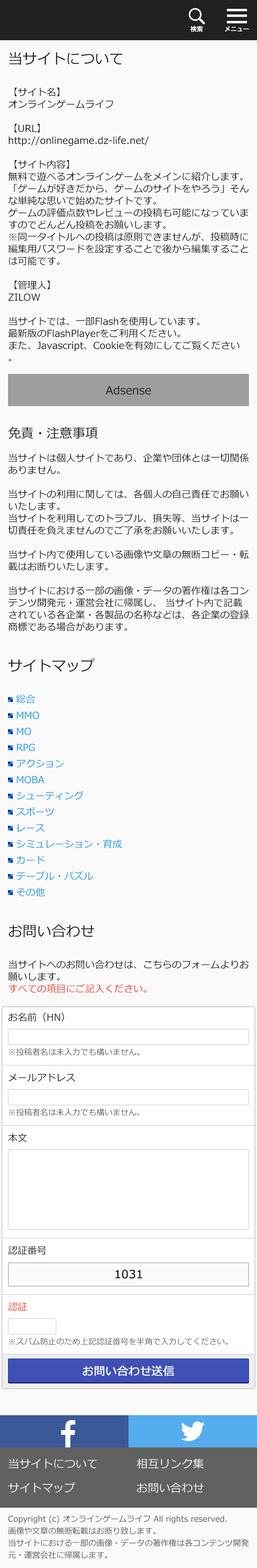
<style>
.page{position:relative;width:257px;height:1568px;background:#fafafa}
.page>*{position:absolute;margin:0}
.t1{font:14.5px "Meiryo";color:#212121}
.t2{font:9.6px/12.1px "Meiryo";color:#212121}
.t3{font:11.3px "Meiryo";color:#212121}
.t4{font:12.9px "Meiryo";color:#212121}
.t5{font:9.6px/16.1px "Meiryo";color:#2196f3}
.t6{font:9.6px/12.1px "Meiryo";color:#f44336}
.t7{font:9.6px/60.3px "Meiryo";color:#212121}
.t8{font:9.6px/112.6px "Meiryo";color:#212121}
.t9{font:9.6px/56.3px "Meiryo";color:#212121}
.t10{font:9.6px/24.1px "Meiryo";color:#f44336}
.t11{font:8px "Meiryo";color:#616161}
.t12{font:11.3px "Meiryo";color:#212121;font-weight:bold}
.t13{font:11.3px "Meiryo";color:#ffffff;font-weight:bold}
</style>
<div class="page">
<p class="t1" style="left:9px;top:52px;width:114px;height:13px">当サイトについて</p>
<p class="t2" style="left:8px;top:88px;width:241px;height:273px">【サイト名】<br>オンラインゲームライフ<br><br>【URL】<br>http://onlinegame.dz-life.net/<br><br>【サイト内容】<br>無料で遊べるオンラインゲームをメインに紹介します。<br>「ゲームが好きだから、ゲームのサイトをやろう」そんな単純な思いで始めたサイトです。<br>ゲームの評価点数やレビューの投稿も可能になっていますのでどんどん投稿をお願いします。<br>※同一タイトルへの投稿は原則できませんが、投稿時に編集用パスワードを設定することで後から編集することは可能です。<br><br>【管理人】<br>ZILOW<br><br>当サイトでは、一部Flashを使用しています。<br>最新版のFlashPlayerをご利用ください。<br>また、Javascript、Cookieを有効にしてご覧ください。</p>
<p class="t3" style="left:106px;top:386px;width:45px;height:9px">Adsense</p>
<p class="t4" style="left:8px;top:427px;width:90px;height:12px">免責・注意事項</p>
<p class="t2" style="left:8px;top:454px;width:241px;height:177px">当サイトは個人サイトであり、企業や団体とは一切関係ありません。<br><br>当サイトの利用に関しては、各個人の自己責任でお願いいたします。<br>当サイトを利用してのトラブル、損失等、当サイトは一切責任を負えませんのでご了承をお願いいたします。<br><br>当サイト内で使用している画像や文章の無断コピー・転載はお断りいたします。<br><br>当サイトにおける一部の画像・データの著作権は各コンテンツ開発元・運営会社に帰属し、 当サイト内で記載されている各企業・各製品の名称などは、各企業の登録商標である場合があります。</p>
<p class="t1" style="left:8px;top:658px;width:87px;height:14px">サイトマップ</p>
<p class="t5" style="left:16px;top:694px;width:106px;height:203px">総合<br>MMO<br>MO<br>RPG<br>アクション<br>MOBA<br>シューティング<br>スポーツ<br>レース<br>シミュレーション・育成<br>カード<br>テーブル・パズル<br>その他</p>
<p class="t1" style="left:9px;top:924px;width:85px;height:14px">お問い合わせ</p>
<p class="t2" style="left:8px;top:960px;width:241px;height:33px">当サイトへのお問い合わせは、こちらのフォームよりお願いします。<br><span class="t6">すべての項目にご記入ください。</span></p>
<p class="t7" style="left:8px;top:1012px;width:68px;height:299px">お名前（HN）<br>メールアドレス<br><span class="t8">本文<br></span><span class="t9">認証番号<br></span><span class="t10">認証</span></p>
<p class="t11" style="left:9px;top:1048px;width:131px;height:8px">※投稿者名は未入力でも構いません。</p>
<p class="t11" style="left:9px;top:1108px;width:131px;height:8px">※投稿者名は未入力でも構いません。</p>
<p class="t12" style="left:115px;top:1270px;width:27px;height:9px">1031</p>
<p class="t11" style="left:9px;top:1338px;width:219px;height:7px">※スパム防止のため上記認証番号を半角で入力してください。</p>
<p class="t13" style="left:83px;top:1365px;width:91px;height:11px">お問い合わせ送信</p>
</div>
